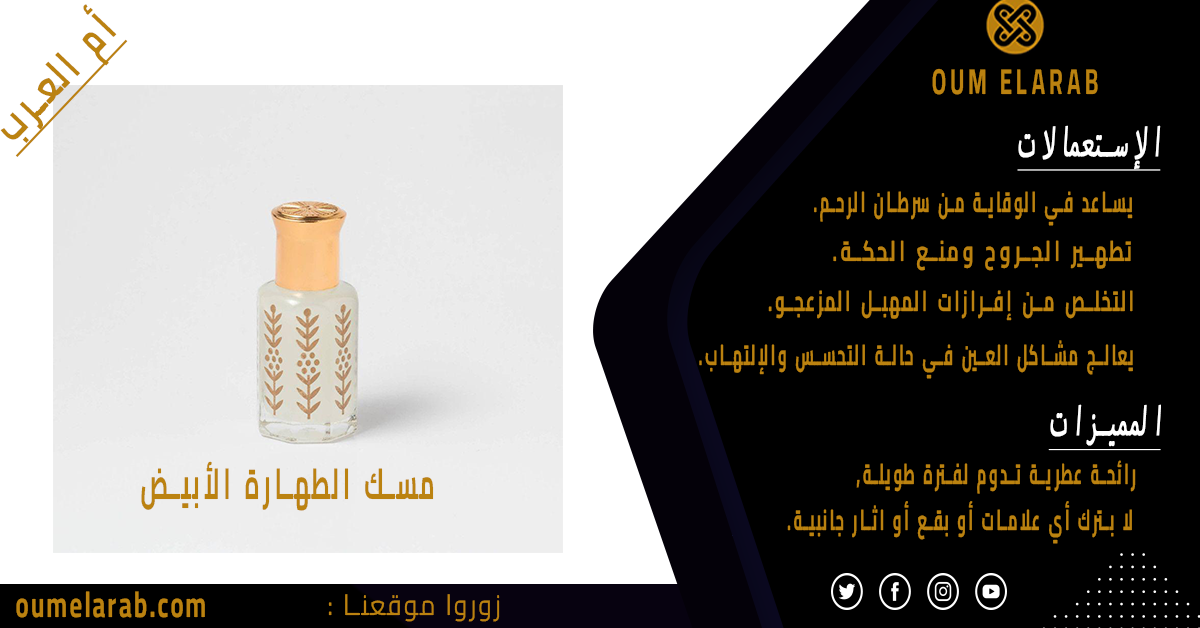
<style>
.page{position:relative;width:1200px;height:628px;background:#000000}
.page>*{position:absolute;margin:0}
.t1{font:43.2px "Cairo-Bold";letter-spacing:0.2em;color:#bb8210;font-weight:bold;text-decoration:underline;scale:0.69 1}
.t2{font:36px "Cairo-Bold";letter-spacing:0.2em;color:#bb8210;font-weight:bold;font-style:italic;scale:0.6 1}
.t3{font:57.6px "MyriadArabic-Regular";letter-spacing:0.2em;color:#fefefe;font-weight:bold;font-style:italic;text-decoration:underline;scale:0.48 1}
.t4{font:28.8px "Cairo-Bold";letter-spacing:0.2em;color:#bb8210;font-weight:bold;font-style:italic;scale:0.49 1}
.t5{font:28.8px "Cairo-Bold";letter-spacing:0.2em;color:#bb8210;font-weight:bold;font-style:italic;scale:0.63 1}
.t6{font:28.8px "Cairo-Bold";letter-spacing:0.2em;color:#bb8210;font-weight:bold;font-style:italic;scale:0.55 1}
.t7{font:57.6px "MyriadArabic-Regular";letter-spacing:0.2em;color:#ffffff;font-weight:bold;font-style:italic;text-decoration:underline;scale:0.48 1}
.t8{font:43.2px "Cairo-Bold";letter-spacing:0.2em;color:#bb8210;font-weight:bold;font-style:italic;scale:0.53 1}
.t9{font:36px "Cairo-Bold";letter-spacing:0.1em;color:#bb8210;font-weight:bold;scale:0.67 1}
.t10{font:28.8px "Cairo-Regular";letter-spacing:0.1em;color:#bb8210;font-weight:bold;scale:0.83 1}
</style>
<div class="page">
<p class="t1" style="left:0px;top:4px;width:128px;height:153px;rotate:-46deg">أم العرب</p>
<p class="t2" style="left:932px;top:68px;width:166px;height:27px">OUM ELARAB</p>
<p class="t3" style="left:1017px;top:125px;width:144px;height:46px">الإستعمالات</p>
<p class="t4" style="left:814px;top:191px;width:319px;height:35px">يساعد في الوقاية من سرطان الرحم.</p>
<p class="t5" style="left:833px;top:240px;width:298px;height:31px">تطهير الجروح ومنع الحكة.</p>
<p class="t6" style="left:768px;top:290px;width:365px;height:31px">التخلص من إفرازات المهبل المزعجو.</p>
<p class="t4" style="left:699px;top:340px;width:434px;height:39px">يعالج مشاكل العين في حالة التحسس والإلتهاب.</p>
<p class="t7" style="left:1048px;top:404px;width:113px;height:47px">المميزات</p>
<p class="t8" style="left:141px;top:461px;width:293px;height:50px">مسك الطهارة الأبيض</p>
<p class="t4" style="left:856px;top:460px;width:280px;height:34px">رائحة عطرية تدوم لفترة طويلة,</p>
<p class="t4" style="left:787px;top:501px;width:345px;height:43px">لا بترك أي علامات أو بقع أو اثار جانبية.</p>
<p class="t9" style="left:16px;top:591px;width:189px;height:27px">oumelarab.com</p>
<p class="t10" style="left:328px;top:594px;width:172px;height:28px">زوروا موقعنا :</p>
</div>
